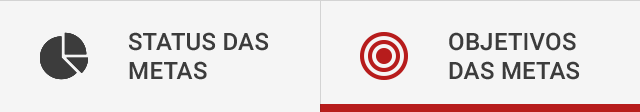
<style>
.page{position:relative;width:640px;height:112px;background:#f5f5f5}
.page>*{position:absolute;margin:0}
.t1{font:24px "Roboto-Medium";letter-spacing:0.01em;color:#3c3c3c;text-transform:uppercase}
</style>
<div class="page">
<p class="t1" style="left:128px;top:32px;width:141px;height:48px">Status das metas</p>
<p class="t1" style="left:449px;top:32px;width:131px;height:48px">Objetivos das metas</p>
</div>
